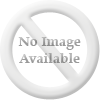
<style>
.page{position:relative;width:100px;height:100px;background:#ffffff}
.page>*{position:absolute;margin:0}
.t1{font:14px "Palatino-Bold";color:#9e9e9e}
</style>
<div class="page">
<p class="t1" style="left:18px;top:37px;width:63px;height:26px;text-align:center">No Image<br>Available</p>
</div>
